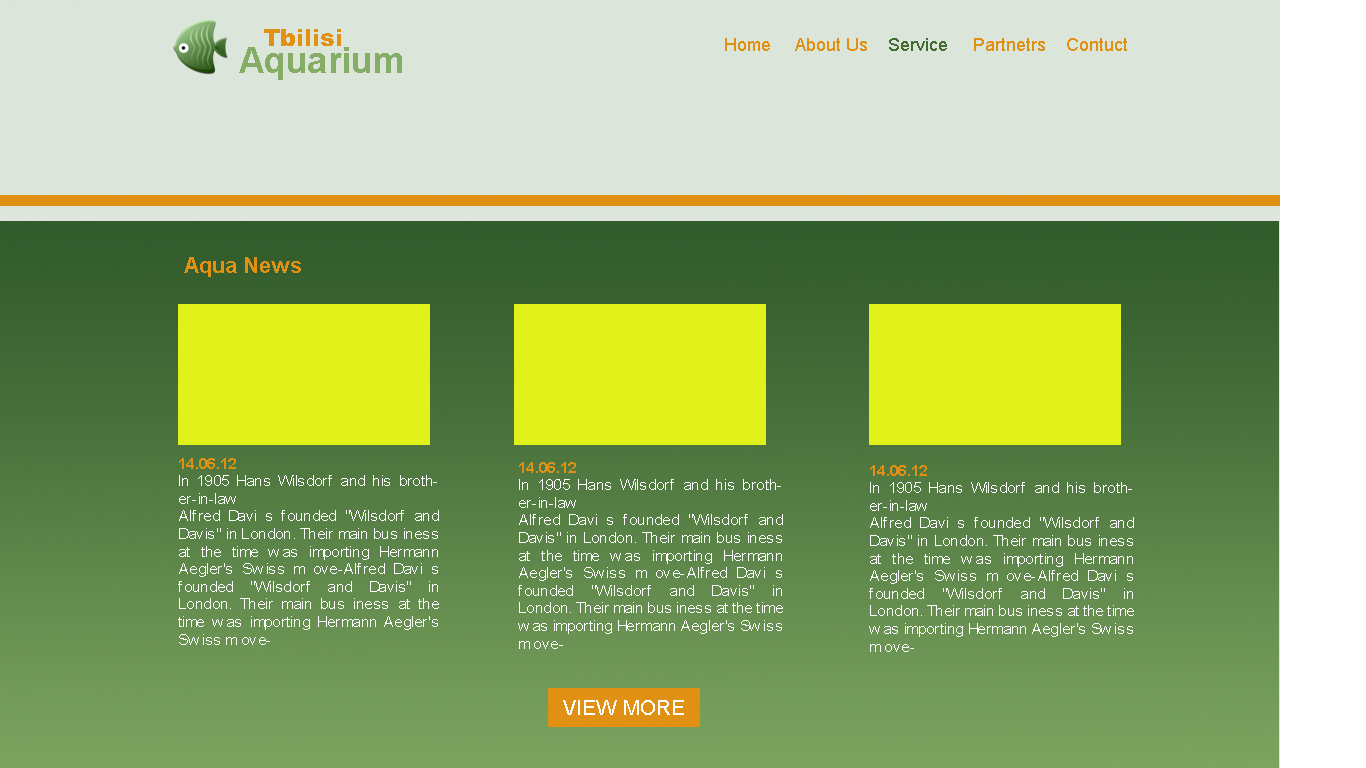
<style>
.page{position:relative;width:1366px;height:768px}
.page>*{position:absolute;margin:0}
.t1{font:23.6px "Arial-Black";color:#e09013}
.t2{font:18px "ArialMT";color:#e09013}
.t3{font:18px "ArialMT";color:#426c30}
.t4{font:36px "Arial-BoldMT";color:#85ad66}
.t5{font:22px "Arial-BoldMT";color:#e09013}
.t6{font:14.7px "ArialMT";color:#ffffff;scale:1.06 1}
.t7{font:14.7px "Arial-BoldMT";color:#e09013;scale:1.06 1}
.t8{font:21px "ArialMT";color:#fefefe}
.t9{font:11.2px "ArialMT";color:#e0f21a}
</style>
<div class="page">
<p class="t1" style="left:264px;top:29px;width:77px;height:17px">Tbilisi</p>
<p class="t2" style="left:725px;top:38px;width:402px;height:13px">Home     About Us    <span class="t3">Service     </span>Partnetrs    Contuct</p>
<p class="t4" style="left:239px;top:47px;width:163px;height:33px">Aquarium</p>
<p class="t5" style="left:184px;top:257px;width:117px;height:20px">Aqua News</p>
<p class="t6" style="left:178px;top:458px;width:261px;height:187px;text-align:justify"><span class="t7">14.06.12<br></span>In 1905 Hans Wilsdorf and his brother-in-law <br>Alfred Davi s founded "Wilsdorf and Davis" in London. Their main bus iness at the time was importing Hermann Aegler's Swiss m ove-Alfred Davi s founded "Wilsdorf and Davis" in London. Their main bus iness at the time was importing Hermann Aegler's Swiss m ove-</p>
<p class="t6" style="left:518px;top:462px;width:265px;height:187px;text-align:justify"><span class="t7">14.06.12<br></span>In 1905 Hans Wilsdorf and his brother-in-law <br>Alfred Davi s founded "Wilsdorf and Davis" in London. Their main bus iness at the time was importing Hermann Aegler's Swiss m ove-Alfred Davi s founded "Wilsdorf and Davis" in London. Their main bus iness at the time was importing Hermann Aegler's Swiss m ove-</p>
<p class="t6" style="left:869px;top:465px;width:265px;height:187px;text-align:justify"><span class="t7">14.06.12<br></span>In 1905 Hans Wilsdorf and his brother-in-law <br>Alfred Davi s founded "Wilsdorf and Davis" in London. Their main bus iness at the time was importing Hermann Aegler's Swiss m ove-Alfred Davi s founded "Wilsdorf and Davis" in London. Their main bus iness at the time was importing Hermann Aegler's Swiss m ove-</p>
<p class="t8" style="left:563px;top:700px;width:121px;height:15px"><span class="t9"> </span>VIEW MORE</p>
</div>
